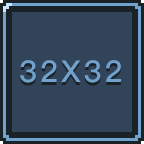
<style>
.page{position:relative;width:144px;height:144px;background:#32445a}
.page>*{position:absolute;margin:0}
.t1{font:30px "PingFang-SC-Bold";letter-spacing:0.1em;color:#71a2ce}
</style>
<div class="page">
<p class="t1" style="left:20px;top:60px;width:101px;height:23px">32X32</p>
</div>
